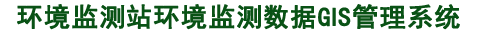
<style>
.page{position:relative;width:477px;height:34px;background:#ffffff}
.page>*{position:absolute;margin:0}
.t1{font:26px "SimHei";letter-spacing:0.1em;color:#095215;font-weight:bold}
</style>
<div class="page">
<p class="t1" style="left:17px;top:4px;width:443px;height:26px">环境监测站环境监测数据GIS管理系统</p>
</div>
